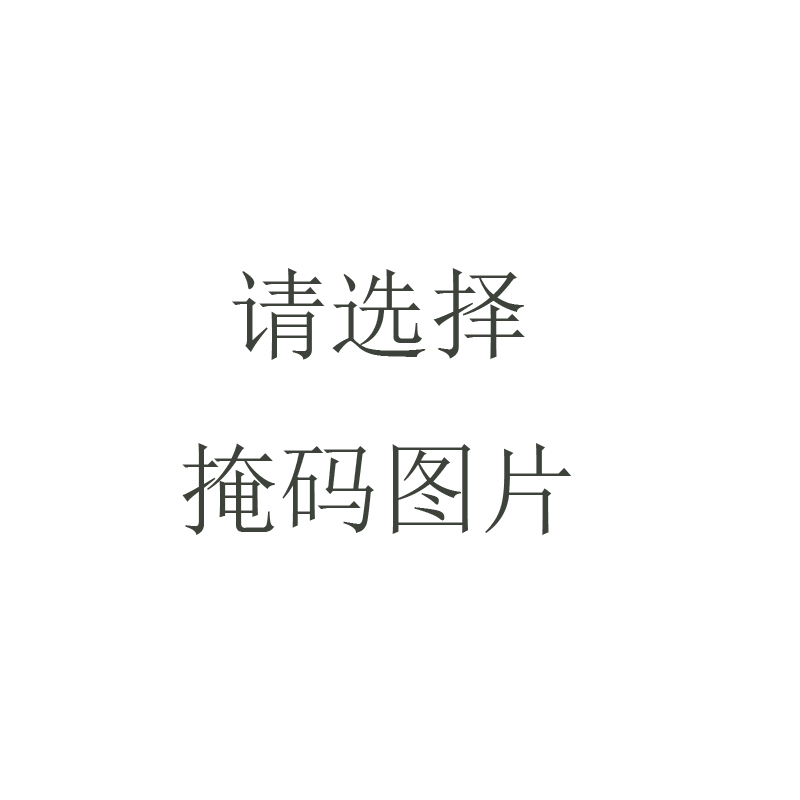
<style>
.page{position:relative;width:800px;height:800px;background:#ffffff}
.page>*{position:absolute;margin:0}
.t1{font:100px "SimSun";color:#3d423b}
</style>
<div class="page">
<p class="t1" style="left:182px;top:268px;width:390px;height:267px;text-align:center">请选择<br>掩码图片</p>
</div>
